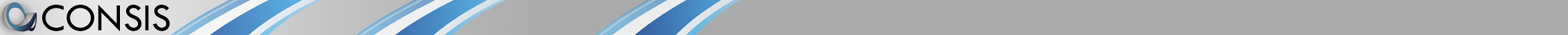
<style>
.page{position:relative;width:1568px;height:35px;background:#ababac}
.page>*{position:absolute;margin:0}
.t1{font:40.3px "TwCenMT-Regular";color:#020202}
</style>
<div class="page">
<p class="t1" style="left:42px;top:5px;width:128px;height:27px">CONSIS</p>
</div>
